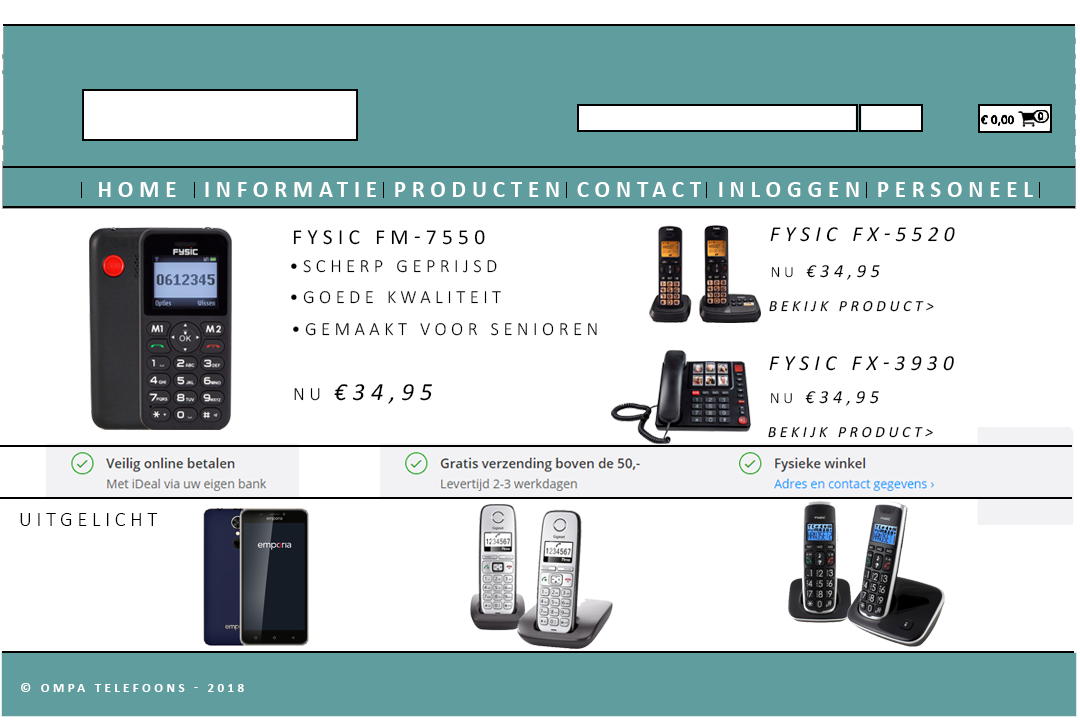
<style>
.page{position:relative;width:1080px;height:720px;background:#ffffff}
.page>*{position:absolute;margin:0}
.t1{font:23.3px "Calibri-Bold";letter-spacing:0.24em;color:#ffffff;text-transform:uppercase}
.t2{font:21.6px "Calibri";letter-spacing:0.24em;color:#000000;text-transform:uppercase}
.t3{font:21.6px "Calibri-Italic";letter-spacing:0.24em;color:#000000;text-transform:uppercase}
.t4{font:18.5px "Calibri-Light";letter-spacing:0.24em;color:#000000;text-transform:uppercase}
.t5{font:18.5px "Calibri-Italic";letter-spacing:0.24em;color:#000000;text-transform:uppercase}
.t6{font:15.4px "Calibri-Light";letter-spacing:0.24em;color:#000000;text-transform:uppercase}
.t7{font:15.4px "Calibri-Italic";letter-spacing:0.24em;color:#000000;text-transform:uppercase}
.t8{font:24.7px "Calibri-Italic";letter-spacing:0.24em;color:#000000;text-transform:uppercase}
.t9{font:20px "Calibri-Light";letter-spacing:0.24em;color:#000000;text-transform:uppercase}
.t10{font:13.3px "Calibri-Bold";letter-spacing:0.24em;color:#ffffff;text-transform:uppercase}
</style>
<div class="page">
<p class="t1" style="left:99px;top:182px;width:934px;height:15px">home  INformatie Producten contact inloggen personeel</p>
<p class="t2" style="left:293px;top:230px;width:192px;height:15px">Fysic FM-7550</p>
<p class="t3" style="left:770px;top:227px;width:185px;height:15px">Fysic FX-5520</p>
<p class="t4" style="left:291px;top:260px;width:206px;height:13px">•Scherp geprijsd</p>
<p class="t5" style="left:771px;top:265px;width:109px;height:15px"><span class="t6">Nu </span>€34,95</p>
<p class="t4" style="left:291px;top:291px;width:210px;height:13px">•Goede kwaliteit</p>
<p class="t7" style="left:769px;top:300px;width:165px;height:12px">Bekijk product&gt;</p>
<p class="t4" style="left:293px;top:323px;width:304px;height:13px">•Gemaakt voor senioren</p>
<p class="t3" style="left:769px;top:356px;width:185px;height:15px">Fysic FX-3930</p>
<p class="t8" style="left:294px;top:384px;width:138px;height:20px"><span class="t4">Nu </span>€34,95</p>
<p class="t5" style="left:771px;top:391px;width:108px;height:15px"><span class="t6">Nu </span>€34,95</p>
<p class="t7" style="left:768px;top:426px;width:165px;height:12px">Bekijk product&gt;</p>
<p class="t9" style="left:20px;top:513px;width:138px;height:13px">uitgelicht</p>
<p class="t10" style="left:21px;top:683px;width:223px;height:9px">© OMpa telefoons - 2018</p>
</div>
